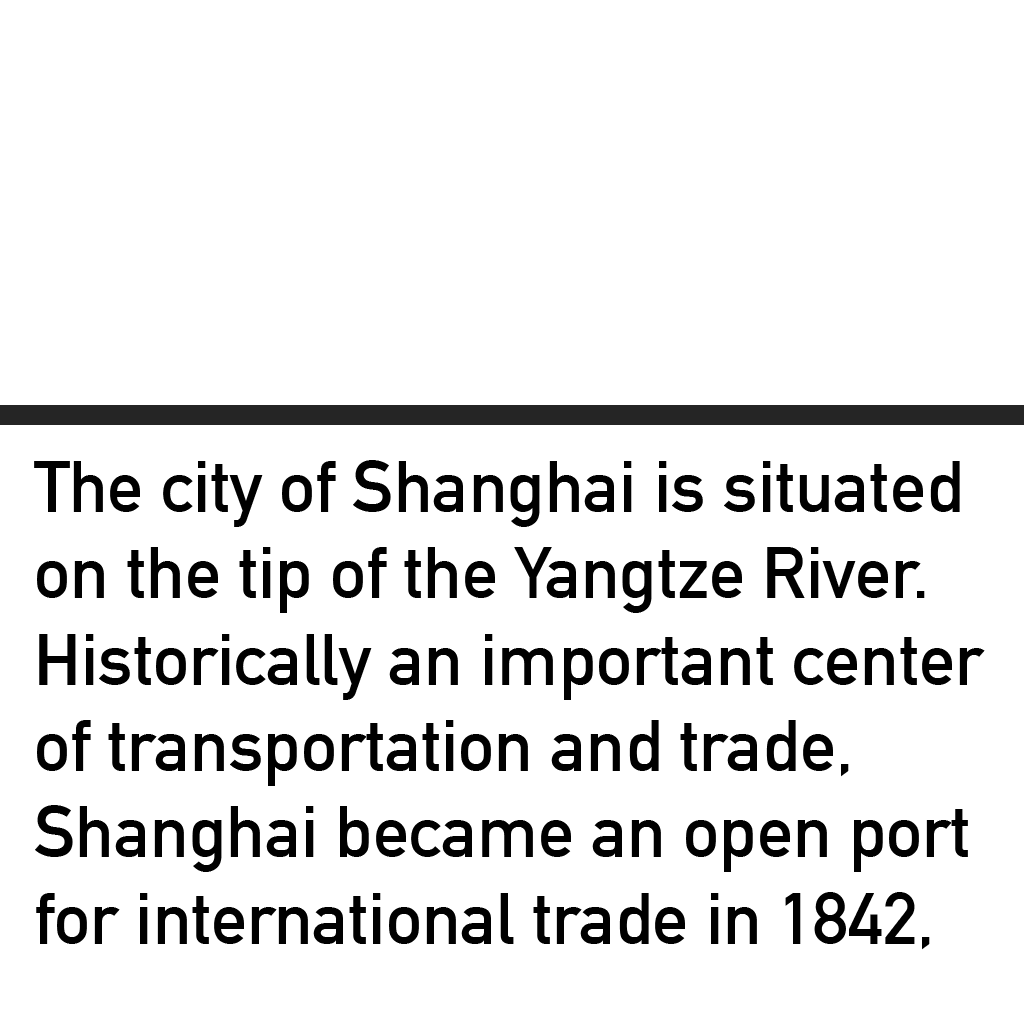
<style>
.page{position:relative;width:1024px;height:1024px;background:#ffffff}
.page>*{position:absolute;margin:0}
.t1{font:72px "DINAlternate-Bold";color:#000000}
</style>
<div class="page">
<p class="t1" style="left:34px;top:460px;width:951px;height:490px">The city of Shanghai is situated<br>on the tip of the Yangtze River. <br>Historically an important center<br>of transportation and trade, <br>Shanghai became an open port <br>for international trade in 1842,</p>
</div>
